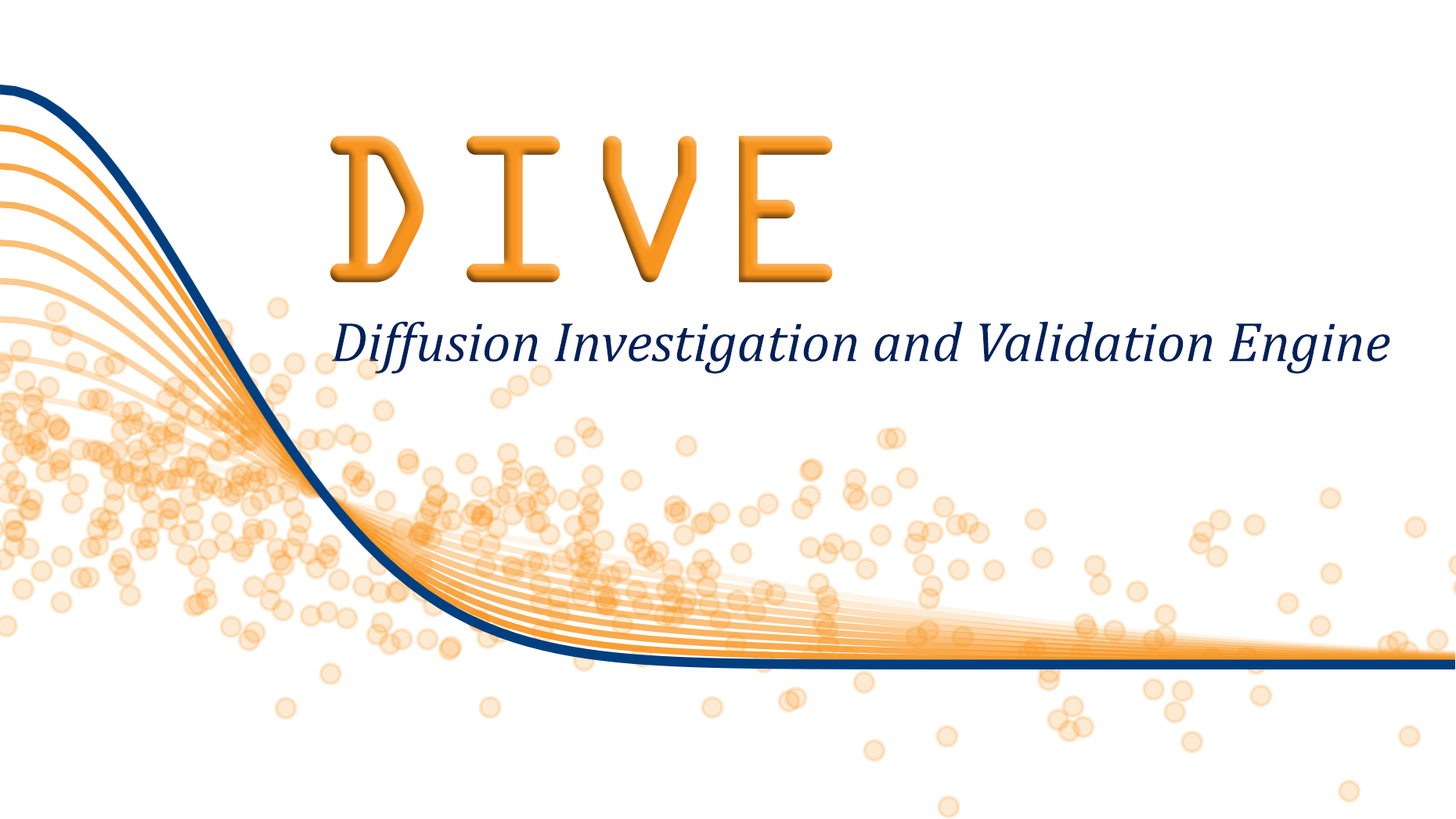
<style>
.page{position:relative;width:1456px;height:819px;background:#ffffff}
.page>*{position:absolute;margin:0}
.t1{font:225.3px "OCRAExtended"}
.t2{font:56.3px "Cambria-Italic";color:#00205b}
</style>
<div class="page">
<p class="t1" style="left:330px;top:135px;width:503px;height:148px">DIVE</p>
<p class="t2" style="left:332px;top:321px;width:1058px;height:52px">Diffusion Investigation and Validation Engine</p>
</div>
